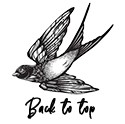
<style>
.page{position:relative;width:125px;height:124px;background:#ffffff}
.page>*{position:absolute;margin:0}
.t1{font:19.3px "TheSecret-Regular";letter-spacing:0.033em;color:#000000;font-weight:bold}
</style>
<div class="page">
<p class="t1" style="left:25px;top:97px;width:70px;height:22px">Back to top</p>
</div>
